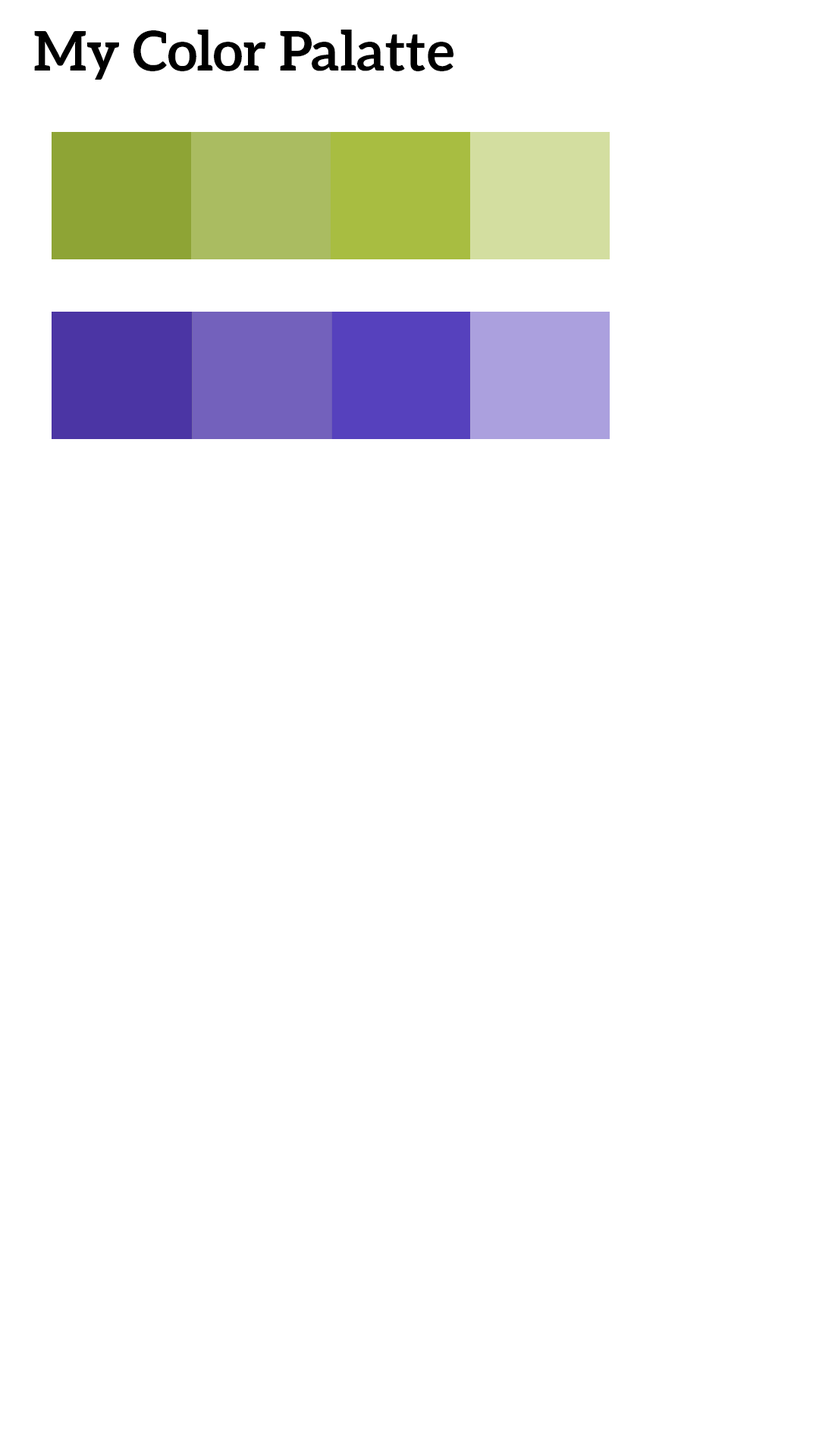
<style>
.page{position:relative;width:819px;height:1456px;background:#ffffff}
.page>*{position:absolute;margin:0}
.t1{font:54.6px "Aleo-Bold";color:#000000}
</style>
<div class="page">
<p class="t1" style="left:34px;top:30px;width:419px;height:50px">My Color Palatte</p>
</div>
